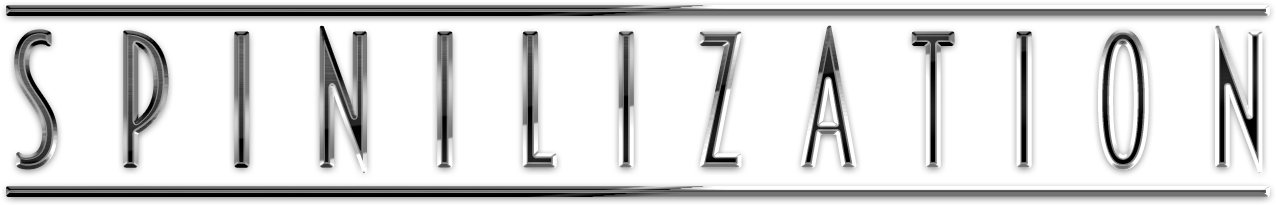
<style>
.page{position:relative;width:1276px;height:205px;background:#ffffff}
.page>*{position:absolute;margin:0}
.t1{font:170px "Breamcatcher-Regular";letter-spacing:0.3em}
</style>
<div class="page">
<p class="t1" style="left:16px;top:27px;width:1245px;height:145px">Spinilization</p>
</div>
